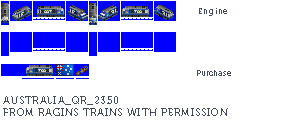
<style>
.page{position:relative;width:289px;height:124px;background:#ffffff}
.page>*{position:absolute;margin:0}
.t1{font:8px "Museo700-Regular";letter-spacing:0.075em;color:#444c5c}
.t2{font:8px "Museo700-Regular";color:#444c5c}
.t3{font:10px "Museo700-Regular";letter-spacing:0.075em;color:#444c5c;text-transform:uppercase}
</style>
<div class="page">
<p class="t1" style="left:199px;top:8px;width:28px;height:8px">Engine</p>
<p class="t2" style="left:197px;top:70px;width:34px;height:6px">Purchase</p>
<p class="t3" style="left:3px;top:96px;width:225px;height:20px">Australia_QR_2350<br>from ragins trains with permission</p>
</div>
